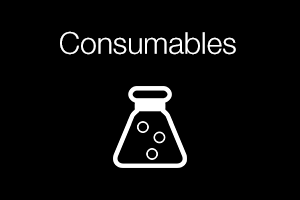
<style>
.page{position:relative;width:300px;height:200px;background:#000000}
.page>*{position:absolute;margin:0}
.t1{font:30px "HelveticaNeueLTStd-Lt";color:#ffffff}
</style>
<div class="page">
<p class="t1" style="left:60px;top:31px;width:176px;height:24px">Consumables</p>
</div>
